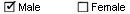
<style>
.page{position:relative;width:130px;height:14px;background:#ffffff}
.page>*{position:absolute;margin:0}
.t1{font:10.7px "ArialMT";color:#000000}
</style>
<div class="page">
<p class="t1" style="left:19px;top:3px;width:21px;height:8px">Male</p>
<p class="t1" style="left:92px;top:3px;width:33px;height:8px">Female</p>
</div>
